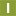
<style>
.page{position:relative;width:16px;height:16px;background:#889c34}
.page>*{position:absolute;margin:0}
.t1{font:14.5px "FiraSans-Medium";letter-spacing:0.1em;color:#ffffff}
</style>
<div class="page">
<p class="t1" style="left:7px;top:3px;width:3px;height:10px">I</p>
</div>
